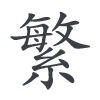
<style>
.page{position:relative;width:100px;height:100px;background:#ffffff}
.page>*{position:absolute;margin:0}
.t1{font:90px "STKaiTi-TC-Regular";color:#3c4045}
</style>
<div class="page">
<p class="t1" style="left:10px;top:11px;width:81px;height:79px">繁</p>
</div>
